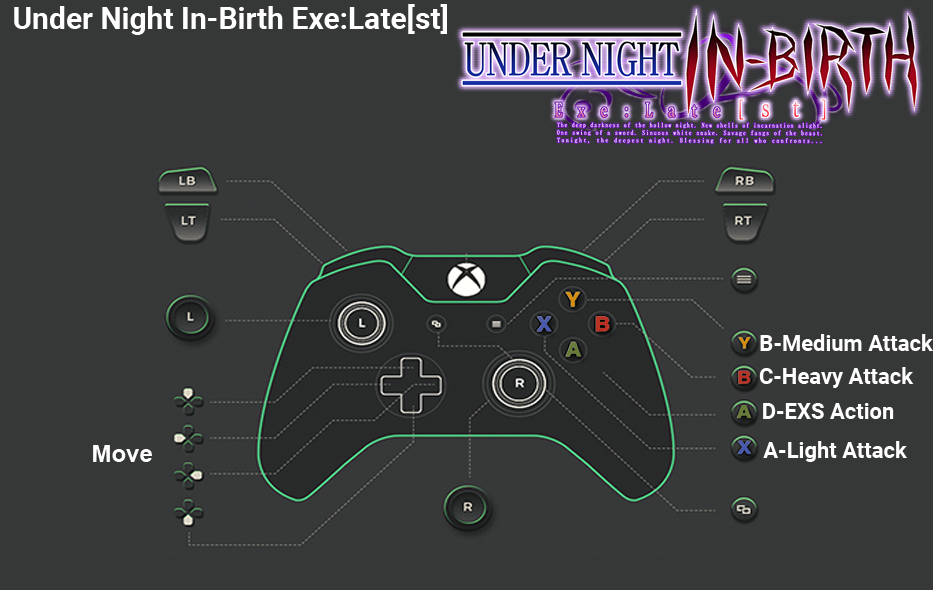
<style>
.page{position:relative;width:933px;height:590px;background:#363838}
.page>*{position:absolute;margin:0}
.t1{font:30px "Roboto-Bold";color:#ffffff}
.t2{font:22px "Roboto-Bold";color:#ffffff}
.t3{font:24px "Arial-BoldMT";color:#fefefe}
</style>
<div class="page">
<p class="t1" style="left:14px;top:4px;width:433px;height:31px">Under Night In-Birth Exe:Late[st]</p>
<p class="t2" style="left:760px;top:334px;width:173px;height:17px">B-Medium Attack</p>
<p class="t2" style="left:759px;top:367px;width:155px;height:21px">C-Heavy Attack</p>
<p class="t2" style="left:763px;top:403px;width:131px;height:16px">D-EXS Action</p>
<p class="t3" style="left:93px;top:445px;width:59px;height:17px">Move</p>
<p class="t2" style="left:763px;top:441px;width:144px;height:21px">A-Light Attack</p>
</div>
